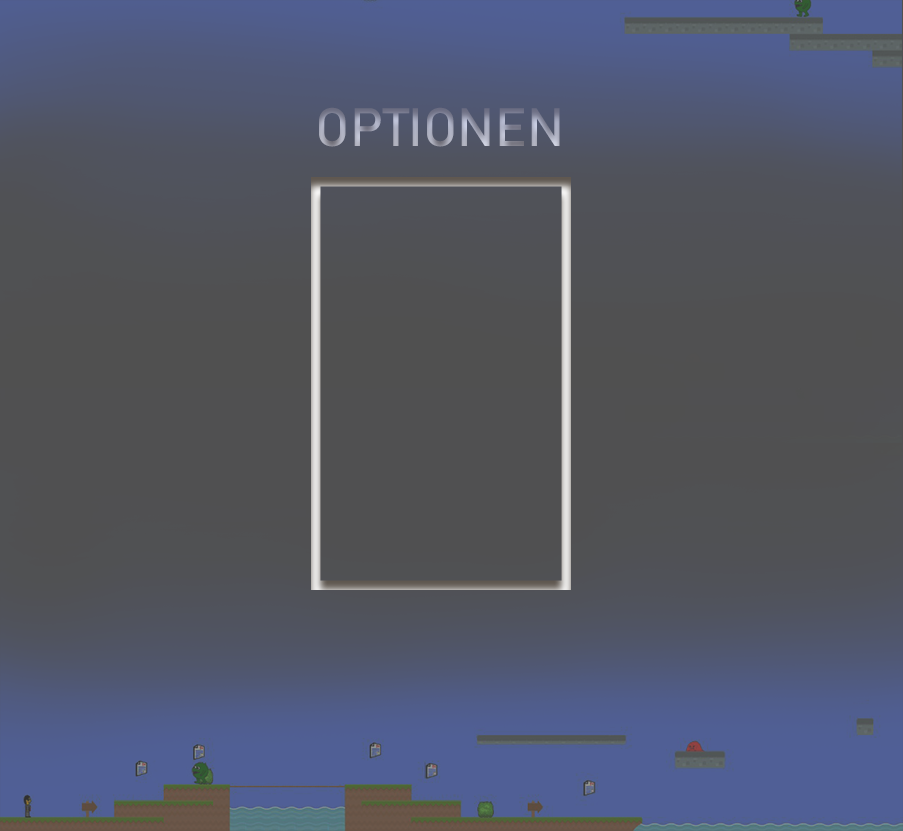
<style>
.page{position:relative;width:903px;height:831px}
.page>*{position:absolute;margin:0}
.t1{font:53.3px "Bahnschrift"}
</style>
<div class="page">
<p class="t1" style="left:319px;top:107px;width:241px;height:40px">OPTIONEN</p>
</div>
